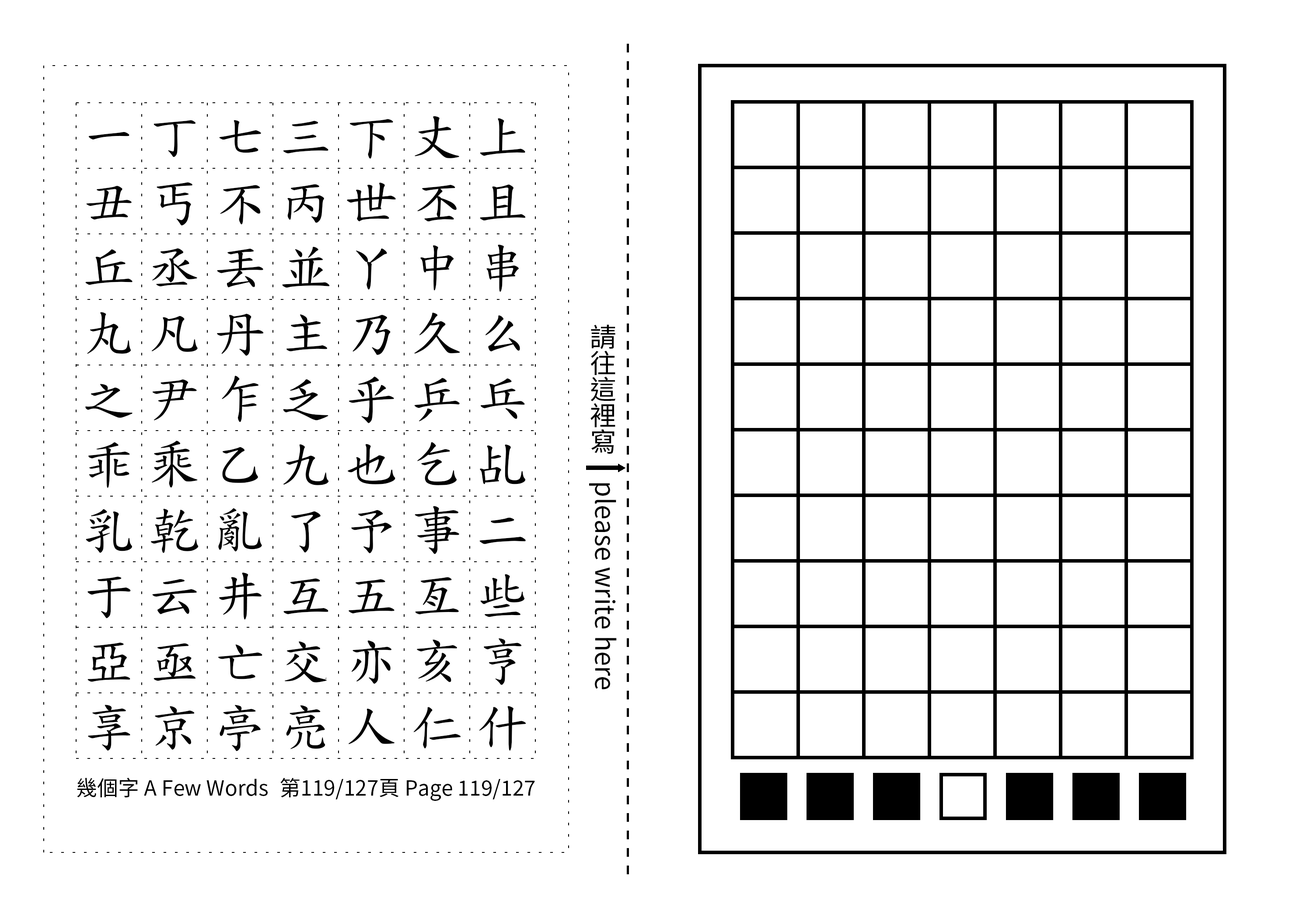
<style>
.page{position:relative;width:1299px;height:918px;background:#ffffff}
.page>*{position:absolute;margin:0}
.t1{font:52.5px/65.6px "TW-Kai-98_1";letter-spacing:0.25em;color:#000000}
.t2{font:26.2px "SourceHanSansTC-Regular";color:#000000}
.t3{font:21px "SourceHanSansTC-Regular";color:#000000}
</style>
<div class="page">
<p class="t1" style="left:85px;top:116px;width:441px;height:636px;text-align:center">一丁七三下丈上丑丐不丙世丕且丘丞丟並丫中串丸凡丹主乃久么之尹乍乏乎乒乓乖乘乙九也乞乩乳乾亂了予事二于云井互五亙些亞亟亡交亦亥亨享京亭亮人仁什</p>
<p class="t2" style="left:589px;top:324px;width:28px;height:366px;text-align:center">請往這裡寫　please write here</p>
<p class="t3" style="left:77px;top:778px;width:191px;height:20px">幾個字 A Few Words</p>
<p class="t3" style="left:280px;top:778px;width:255px;height:23px">第119/127頁 Page 119/127</p>
</div>
